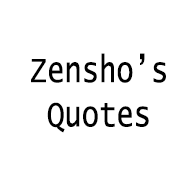
<style>
.page{position:relative;width:192px;height:192px;background:#ffffff}
.page>*{position:absolute;margin:0}
.t1{font:36.9px "LucidaConsole";letter-spacing:-0.01em;color:#000000;scale:0.79 1}
</style>
<div class="page">
<p class="t1" style="left:31px;top:53px;width:135px;height:80px;text-align:center">Zensho’s<br>Quotes</p>
</div>
